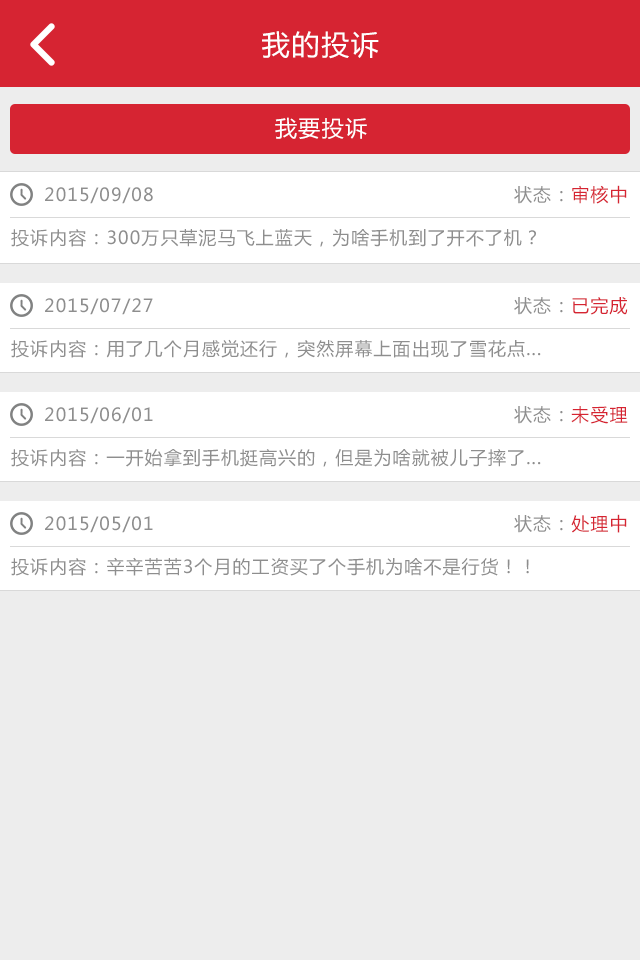
<style>
.page{position:relative;width:640px;height:960px;background:#ededed}
.page>*{position:absolute;margin:0}
.t1{font:28px "MicrosoftYaHei";letter-spacing:0.06em;color:#ffffff}
.t2{font:22px "MicrosoftYaHei";letter-spacing:0.06em;color:#ffffff}
.t3{font:18px "MicrosoftYaHei";letter-spacing:0.06em;color:#8e8e8e}
.t4{font:18px "MicrosoftYaHei";letter-spacing:0.06em;color:#d62432}
</style>
<div class="page">
<p class="t1" style="left:262px;top:31px;width:117px;height:28px">我的投诉</p>
<p class="t2" style="left:275px;top:117px;width:92px;height:22px">我要投诉</p>
<p class="t3" style="left:514px;top:185px;width:113px;height:19px">状态：<span class="t4">审核中</span></p>
<p class="t3" style="left:45px;top:187px;width:108px;height:17px">2015/09/08</p>
<p class="t3" style="left:11px;top:229px;width:525px;height:18px">投诉内容：300万只草泥马飞上蓝天，为啥手机到了开不了机？</p>
<p class="t3" style="left:45px;top:298px;width:108px;height:17px">2015/07/27</p>
<p class="t3" style="left:514px;top:297px;width:114px;height:18px">状态：<span class="t4">已完成</span></p>
<p class="t3" style="left:11px;top:339px;width:530px;height:19px">投诉内容：用了几个月感觉还行，突然屏幕上面出现了雪花点...</p>
<p class="t3" style="left:45px;top:407px;width:108px;height:17px">2015/06/01</p>
<p class="t3" style="left:514px;top:406px;width:114px;height:18px">状态：<span class="t4">未受理</span></p>
<p class="t3" style="left:11px;top:449px;width:530px;height:18px">投诉内容：一开始拿到手机挺高兴的，但是为啥就被儿子摔了...</p>
<p class="t3" style="left:45px;top:516px;width:108px;height:17px">2015/05/01</p>
<p class="t3" style="left:514px;top:514px;width:113px;height:19px">状态：<span class="t4">处理中</span></p>
<p class="t3" style="left:11px;top:557px;width:518px;height:19px">投诉内容：辛辛苦苦3个月的工资买了个手机为啥不是行货！！</p>
</div>
